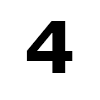
<style>
.page{position:relative;width:100px;height:100px;background:#ffffff}
.page>*{position:absolute;margin:0}
.t1{font:72px "Verdana-Bold";color:#000000}
</style>
<div class="page">
<p class="t1" style="left:26px;top:21px;width:47px;height:52px">4</p>
</div>
